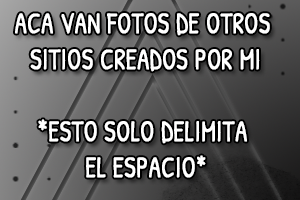
<style>
.page{position:relative;width:300px;height:200px}
.page>*{position:absolute;margin:0}
.t1{font:30px "PatrickHand-Regular";letter-spacing:0.01em;color:#ffffff;text-transform:uppercase;font-weight:bold;scale:0.8 1}
</style>
<div class="page">
<p class="t1" style="left:15px;top:13px;width:255px;height:165px;text-align:center">ACa van fotos de otros <br>sitios creados por mi<br><br>*ESTO SOLO DELIMITA <br>EL ESPACIO*</p>
</div>
